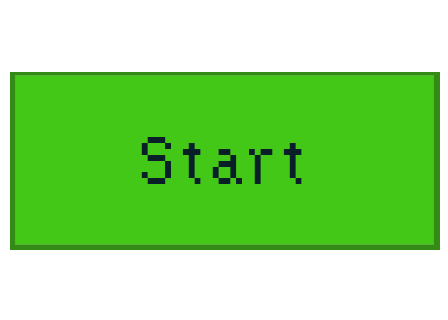
<style>
.page{position:relative;width:448px;height:320px;background:#44c818}
.page>*{position:absolute;margin:0}
.t1{font:64px "HydrophiliaIced";letter-spacing:0.1em;color:#081f28}
</style>
<div class="page">
<p class="t1" style="left:141px;top:137px;width:161px;height:47px">Start</p>
</div>
